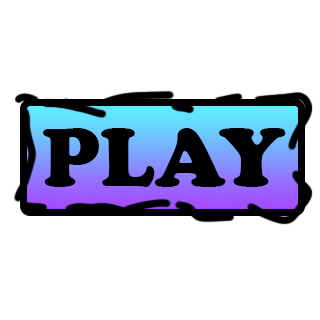
<style>
.page{position:relative;width:320px;height:320px;background:#ffffff}
.page>*{position:absolute;margin:0}
.t1{font:84.7px "CooperBlack";color:#000000}
</style>
<div class="page">
<p class="t1" style="left:43px;top:128px;width:243px;height:59px">PLAY</p>
</div>
